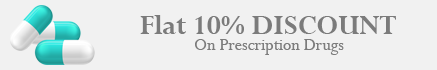
<style>
.page{position:relative;width:437px;height:70px;background:#f1f1f1}
.page>*{position:absolute;margin:0}
.t1{font:30.1px "Perpetua-Bold";color:#7b7b7b}
.t2{font:18.1px "Perpetua";color:#7c7c7c}
</style>
<div class="page">
<p class="t1" style="left:140px;top:15px;width:256px;height:19px">Flat 10% DISCOUNT</p>
<p class="t2" style="left:195px;top:39px;width:149px;height:16px">On Prescription Drugs</p>
</div>
